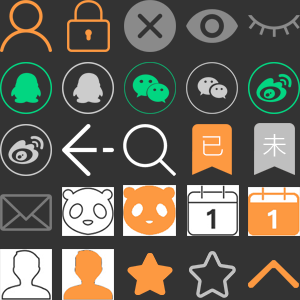
<style>
.page{position:relative;width:300px;height:300px;background:#333333}
.page>*{position:absolute;margin:0}
.t1{font:23.3px "MicrosoftYaHeiLight";color:#ffffff}
.t2{font:23.8px "MicrosoftYaHeiLight";color:#ffffff}
</style>
<div class="page">
<p class="t1" style="left:202px;top:136px;width:21px;height:20px">已</p>
<p class="t2" style="left:263px;top:134px;width:23px;height:23px">未</p>
</div>
